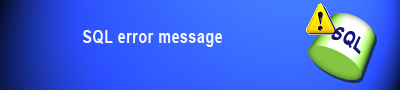
<style>
.page{position:relative;width:400px;height:90px}
.page>*{position:absolute;margin:0}
.t1{font:18.2px "Arial-BoldMT";letter-spacing:0.05em;color:#f5f6f9;scale:0.77 1}
.t2{font:19.6px "Arial-BoldMT";letter-spacing:0.05em;color:#121777;scale:0.77 1}
</style>
<div class="page">
<p class="t1" style="left:83px;top:30px;width:140px;height:17px">SQL error message</p>
<p class="t2" style="left:331px;top:27px;width:30px;height:28px;rotate:28deg">SQL</p>
</div>
